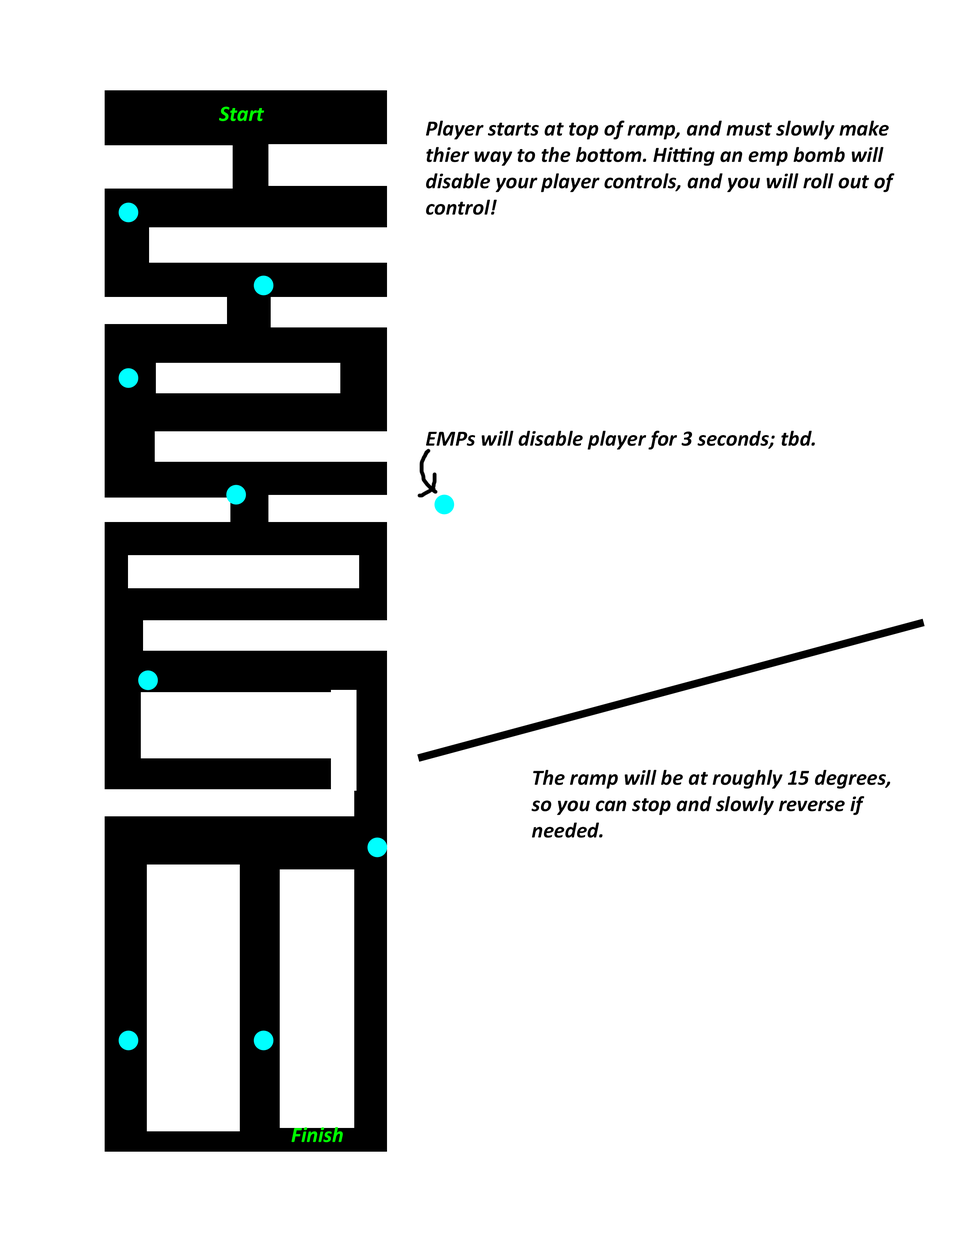
<style>
.page{position:relative;width:960px;height:1242px;background:#ffffff}
.page>*{position:absolute;margin:0}
.t1{font:22px "Calibri-BoldItalic";color:#00ff00}
.t2{font:22px "Calibri-BoldItalic";color:#000000}
</style>
<div class="page">
<p class="t1" style="left:219px;top:107px;width:45px;height:14px">Start</p>
<p class="t2" style="left:426px;top:120px;width:468px;height:95px">Player starts at top of ramp, and must slowly make thier way to the bottom. Hitting an emp bomb will disable your player controls, and you will roll out of control!</p>
<p class="t2" style="left:426px;top:431px;width:389px;height:19px">EMPs will disable player for 3 seconds; tbd.</p>
<p class="t2" style="left:532px;top:770px;width:358px;height:68px">The ramp will be at roughly 15 degrees, so you can stop and slowly reverse if needed.</p>
<p class="t1" style="left:291px;top:1127px;width:52px;height:15px">Finish</p>
</div>
